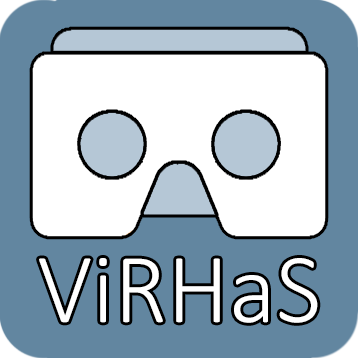
<style>
.page{position:relative;width:358px;height:358px;background:#6286a0}
.page>*{position:absolute;margin:0}
.t1{font:100px "Calibri-Light";color:#ffffff}
</style>
<div class="page">
<p class="t1" style="left:39px;top:258px;width:279px;height:65px">ViRHaS</p>
</div>
